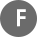
<style>
.page{position:relative;width:37px;height:37px;background:#6b6b6b}
.page>*{position:absolute;margin:0}
.t1{font:22px "NanumGothicExtraBold";color:#ffffff}
</style>
<div class="page">
<p class="t1" style="left:17px;top:9px;width:9px;height:18px">F</p>
</div>
